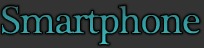
<style>
.page{position:relative;width:204px;height:48px;background:#333333}
.page>*{position:absolute;margin:0}
.t1{font:40px "PlantagenetCherokee";letter-spacing:-0.07em;font-weight:bold}
</style>
<div class="page">
<p class="t1" style="left:1px;top:4px;width:200px;height:42px">Smartphone</p>
</div>
